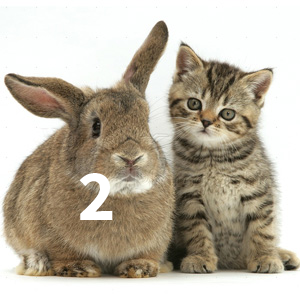
<style>
.page{position:relative;width:300px;height:300px}
.page>*{position:absolute;margin:0}
.t1{font:72px "SourceSansPro-Bold";letter-spacing:0.03em;color:#ffffff}
</style>
<div class="page">
<p class="t1" style="left:79px;top:173px;width:34px;height:47px">2</p>
</div>
